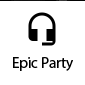
<style>
.page{position:relative;width:85px;height:85px;background:#ffffff}
.page>*{position:absolute;margin:0}
.t1{font:15px "MyriadPro-Regular"}
</style>
<div class="page">
<p class="t1" style="left:13px;top:56px;width:60px;height:14px">Epic Party</p>
</div>
